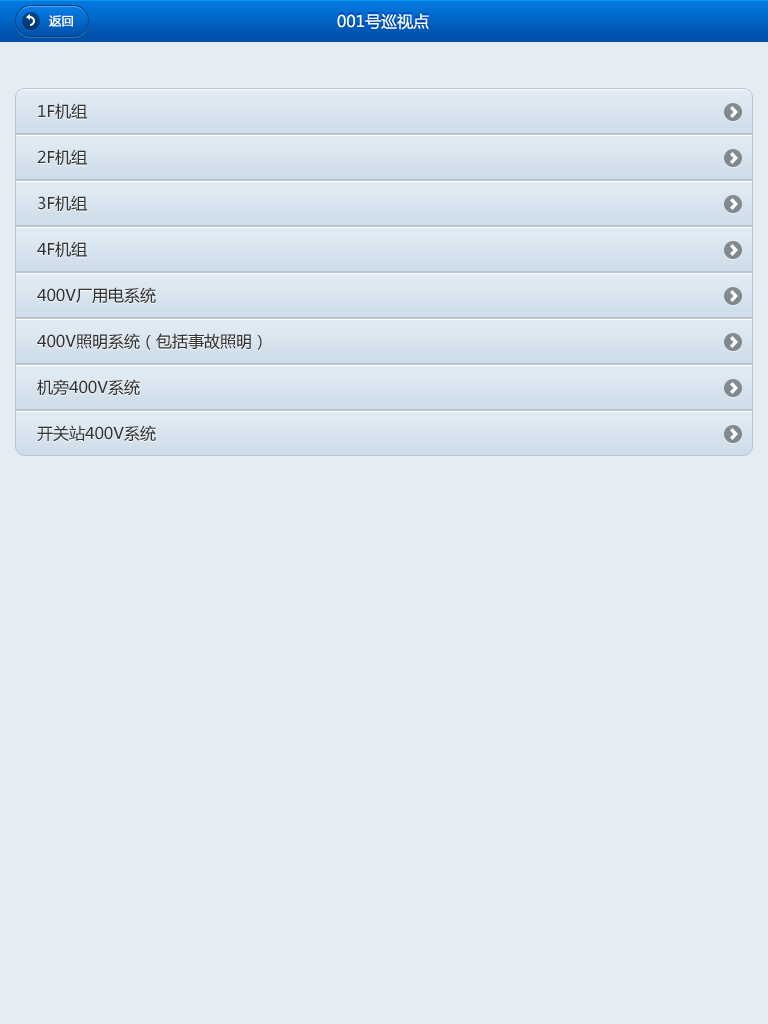
<style>
.page{position:relative;width:768px;height:1024px;background:#e5ecf2}
.page>*{position:absolute;margin:0}
.t1{font:12px "MicrosoftYaHei";color:#ffffff;font-weight:bold}
.t2{font:16px "MicrosoftYaHei";color:#ffffff}
.t3{font:16px "MicrosoftYaHei";color:#333333}
</style>
<div class="page">
<p class="t1" style="left:49px;top:15px;width:24px;height:12px">返回</p>
<p class="t2" style="left:337px;top:13px;width:92px;height:17px">001号巡视点</p>
<p class="t3" style="left:38px;top:103px;width:49px;height:17px">1F机组</p>
<p class="t3" style="left:37px;top:149px;width:50px;height:17px">2F机组</p>
<p class="t3" style="left:38px;top:195px;width:49px;height:17px">3F机组</p>
<p class="t3" style="left:37px;top:241px;width:50px;height:17px">4F机组</p>
<p class="t3" style="left:37px;top:287px;width:119px;height:17px">400V厂用电系统</p>
<p class="t3" style="left:37px;top:333px;width:225px;height:17px">400V照明系统（包括事故照明）</p>
<p class="t3" style="left:37px;top:379px;width:103px;height:17px">机旁400V系统</p>
<p class="t3" style="left:37px;top:425px;width:119px;height:17px">开关站400V系统</p>
</div>
